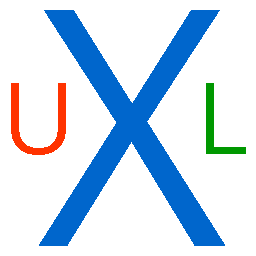
<style>
.page{position:relative;width:256px;height:256px;background:#ffffff}
.page>*{position:absolute;margin:0}
.t1{font:330px "OpenSans";color:#0066cc}
.t2{font:100px "OpenSans";color:#ff3300}
.t3{font:100px "OpenSans";color:#009800}
</style>
<div class="page">
<p class="t1" style="left:39px;top:10px;width:186px;height:236px">X</p>
<p class="t2" style="left:11px;top:83px;width:55px;height:72px">U</p>
<p class="t3" style="left:206px;top:83px;width:40px;height:71px">L</p>
</div>
